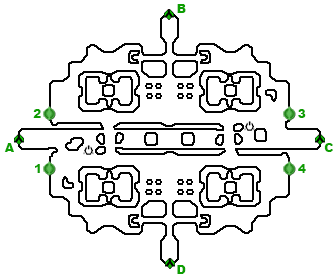
<style>
.page{position:relative;width:336px;height:275px;background:#ffffff}
.page>*{position:absolute;margin:0}
.t1{font:12px "Arial-Black";color:#0d9e01}
</style>
<div class="page">
<p class="t1" style="left:177px;top:4px;width:9px;height:9px">B</p>
<p class="t1" style="left:33px;top:109px;width:8px;height:9px">2</p>
<p class="t1" style="left:298px;top:109px;width:8px;height:9px">3</p>
<p class="t1" style="left:4px;top:143px;width:10px;height:9px">A</p>
<p class="t1" style="left:324px;top:143px;width:9px;height:9px">C</p>
<p class="t1" style="left:35px;top:164px;width:5px;height:9px">1</p>
<p class="t1" style="left:298px;top:164px;width:8px;height:9px">4</p>
<p class="t1" style="left:177px;top:265px;width:9px;height:9px">D</p>
</div>
